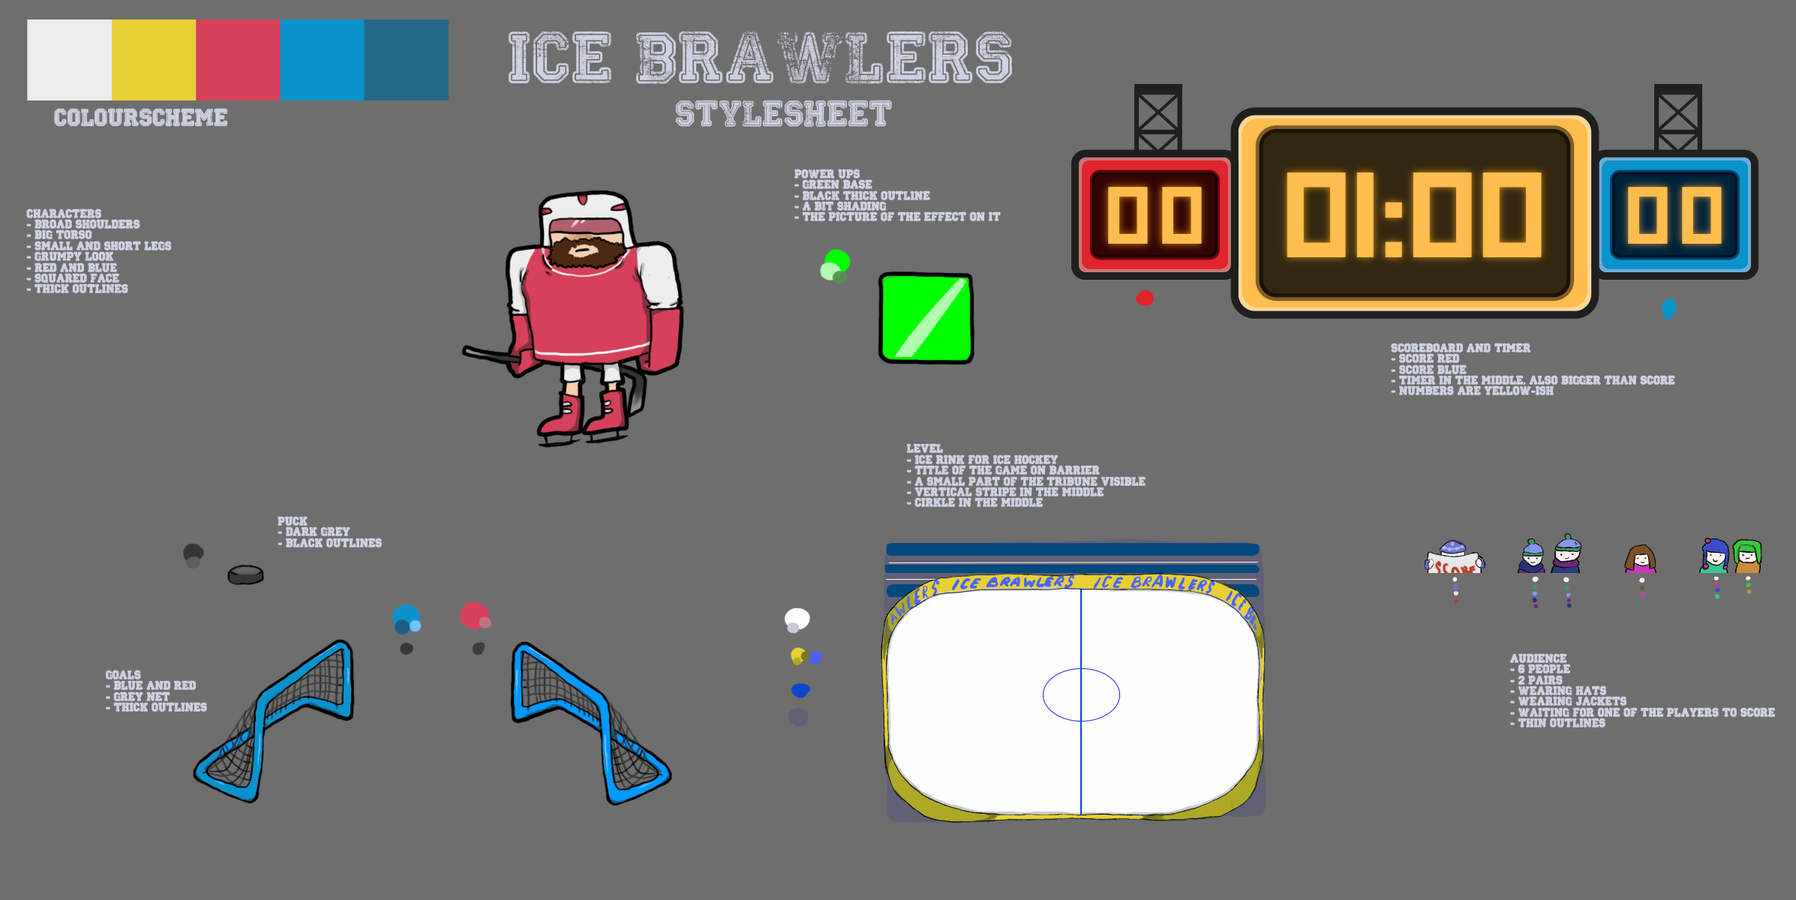
<style>
.page{position:relative;width:1796px;height:900px;background:#6e6e6e}
.page>*{position:absolute;margin:0}
.t1{font:54px "Colleged";color:#ced1e1}
.t2{font:27px "Colleged";color:#ced1e1}
.t3{font:18px "Colleged";color:#ced1e1}
.t4{font:9px "Colleged";color:#ced1e1}
</style>
<div class="page">
<p class="t1" style="left:508px;top:31px;width:504px;height:53px">Ice Brawlers</p>
<p class="t2" style="left:675px;top:100px;width:217px;height:27px">stylesheet</p>
<p class="t3" style="left:54px;top:108px;width:173px;height:19px">colourscheme</p>
<p class="t4" style="left:794px;top:169px;width:206px;height:52px">power ups<br>- green base<br>- black thick outline<br>- a bit shading<br>- the picture of the effect on it</p>
<p class="t4" style="left:26px;top:208px;width:146px;height:85px">characters<br>- broad shoulders<br>- big torso<br>- small and short legs<br>- grumpy look<br>- red and blue<br>- squared face<br>- thick outlines</p>
<p class="t4" style="left:1390px;top:343px;width:285px;height:52px">scoreboard and timer<br>- score red<br>- score blue<br>- timer in the middle, also bigger than score<br>- numbers are yellow-ish</p>
<p class="t4" style="left:906px;top:443px;width:239px;height:64px">level<br>- ice rink for ice hockey<br>- title of the game on barrier<br>- a small part of the tribune visible<br>- vertical stripe in the middle<br>- cirkle in the middle</p>
<p class="t4" style="left:278px;top:516px;width:104px;height:32px">puck<br>- dark grey<br>- black outlines</p>
<p class="t4" style="left:1510px;top:653px;width:264px;height:75px">audience<br>- 6 people<br>- 2 pairs<br>- wearing hats <br>- wearing jackets<br>- waiting for one of the players to score<br>- thin outlines</p>
<p class="t4" style="left:106px;top:670px;width:101px;height:42px">goals<br>- blue and red<br>- grey net<br>- thick outlines</p>
</div>
